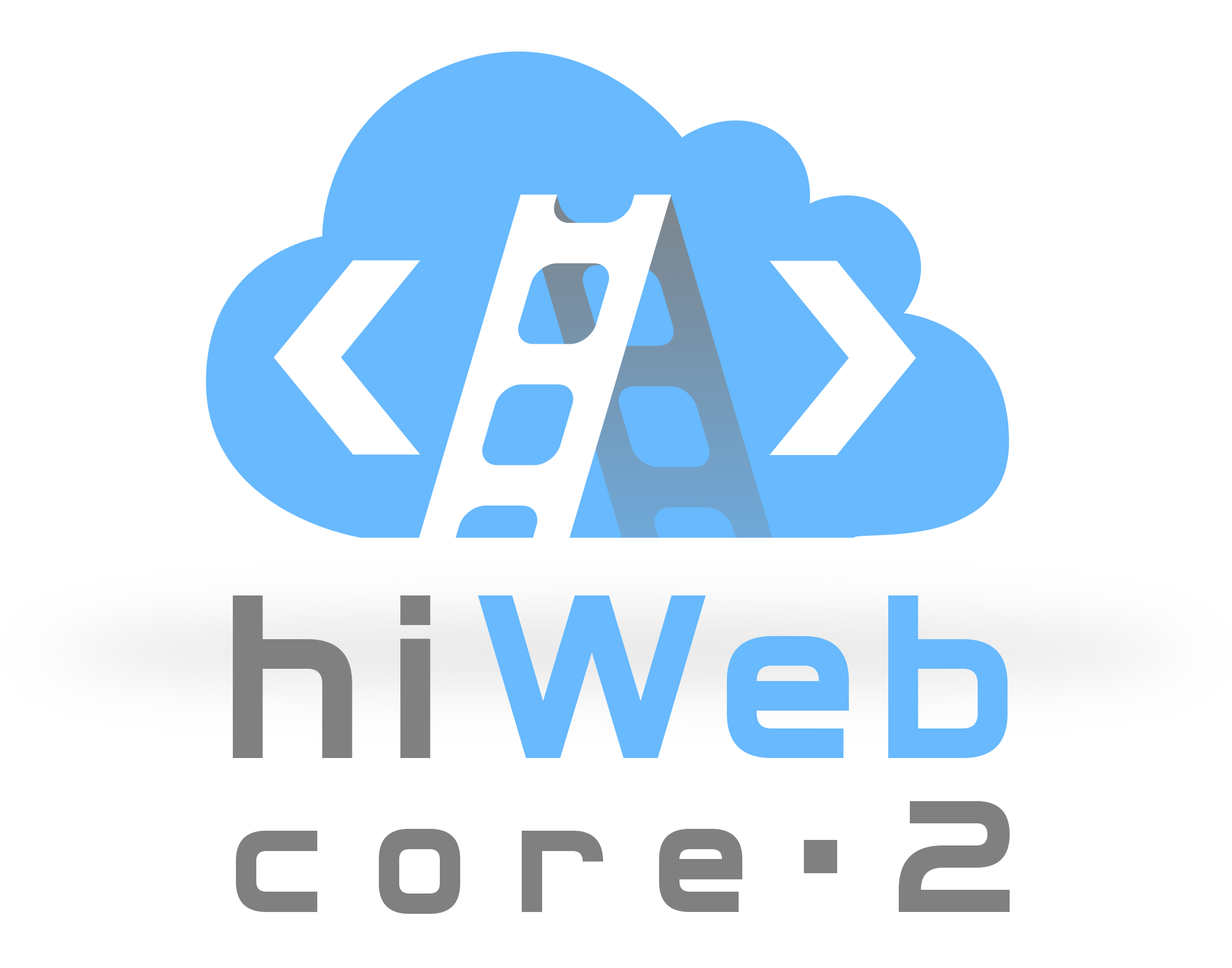
<style>
.page{position:relative;width:1232px;height:968px;background:#ffffff}
.page>*{position:absolute;margin:0}
.t1{font:184.7px/154px "Archangelsk";letter-spacing:0.274em;color:#808080}
.t2{font:270.9px/154px "Archangelsk";letter-spacing:0.117em;color:#808080}
.t3{font:270.9px/154px "Archangelsk";letter-spacing:0.117em;color:#68b9fd}
</style>
<div class="page">
<p class="t1" style="left:232px;top:596px;width:777px;height:318px;text-align:center"><span class="t2">hi</span><span class="t3">Web<br></span>core•2</p>
</div>
